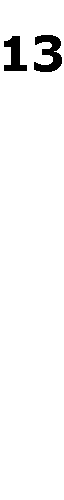
<style>
.page{position:relative;width:64px;height:500px;background:#ffffff}
.page>*{position:absolute;margin:0}
.t1{font:48px "Verdana-Bold";color:#000000}
</style>
<div class="page">
<p class="t1" style="left:4px;top:35px;width:58px;height:37px">13</p>
</div>
